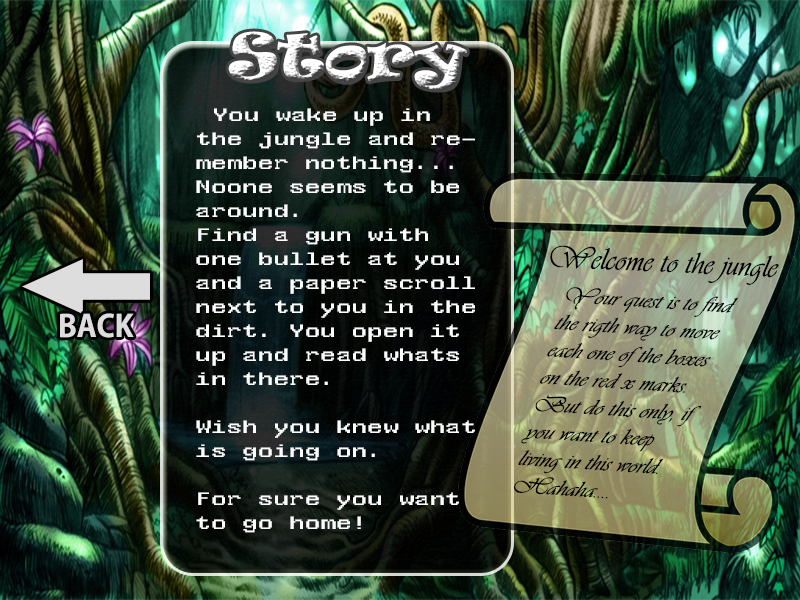
<style>
.page{position:relative;width:800px;height:600px}
.page>*{position:absolute;margin:0}
.t1{font:60px "Ravie"}
.t2{font:20px "WST_Engl";color:#ffffff}
.t3{font:32px "Vivaldii";color:#000000}
.t4{font:23.4px "Vivaldii";color:#000000;scale:1.07 1}
.t5{font:30px "AdobeGothicStd-Bold";color:#dddddd}
</style>
<div class="page">
<p class="t1" style="left:228px;top:31px;width:239px;height:59px">Story</p>
<p class="t2" style="left:196px;top:108px;width:279px;height:425px">You wake up in the jungle and remember nothing... <br>Noone seems to be around.<br>Find a gun with one bullet at you and a paper scroll next to you in the dirt. You open it up and read whats in there.<br><br>Wish you knew what <br>is going on.<br><br>For sure you want to go home!</p>
<p class="t3" style="left:550px;top:245px;width:229px;height:40px;rotate:3deg">Welcome to the jungle</p>
<p class="t4" style="left:514px;top:287px;width:224px;height:212px;rotate:4deg">Your quest is to find <br>the rigth way to move <br>each one of the boxes <br>on the red x marks.<br>But do this only, if <br>you want to keep <br>living in this world.<br>Hahaha....</p>
<p class="t5" style="left:60px;top:313px;width:74px;height:25px">BACK</p>
</div>
